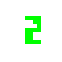
<style>
.page{position:relative;width:62px;height:62px;background:#ffffff}
.page>*{position:absolute;margin:0}
.t1{font:32px "Commo-Regular";color:#00ff00}
</style>
<div class="page">
<p class="t1" style="left:25px;top:16px;width:16px;height:28px">2</p>
</div>
